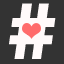
<style>
.page{position:relative;width:64px;height:64px;background:#333333}
.page>*{position:absolute;margin:0}
.t1{font:83.3px "Bauhaus93";color:#fff9f9}
</style>
<div class="page">
<p class="t1" style="left:9px;top:3px;width:47px;height:56px">#</p>
</div>
